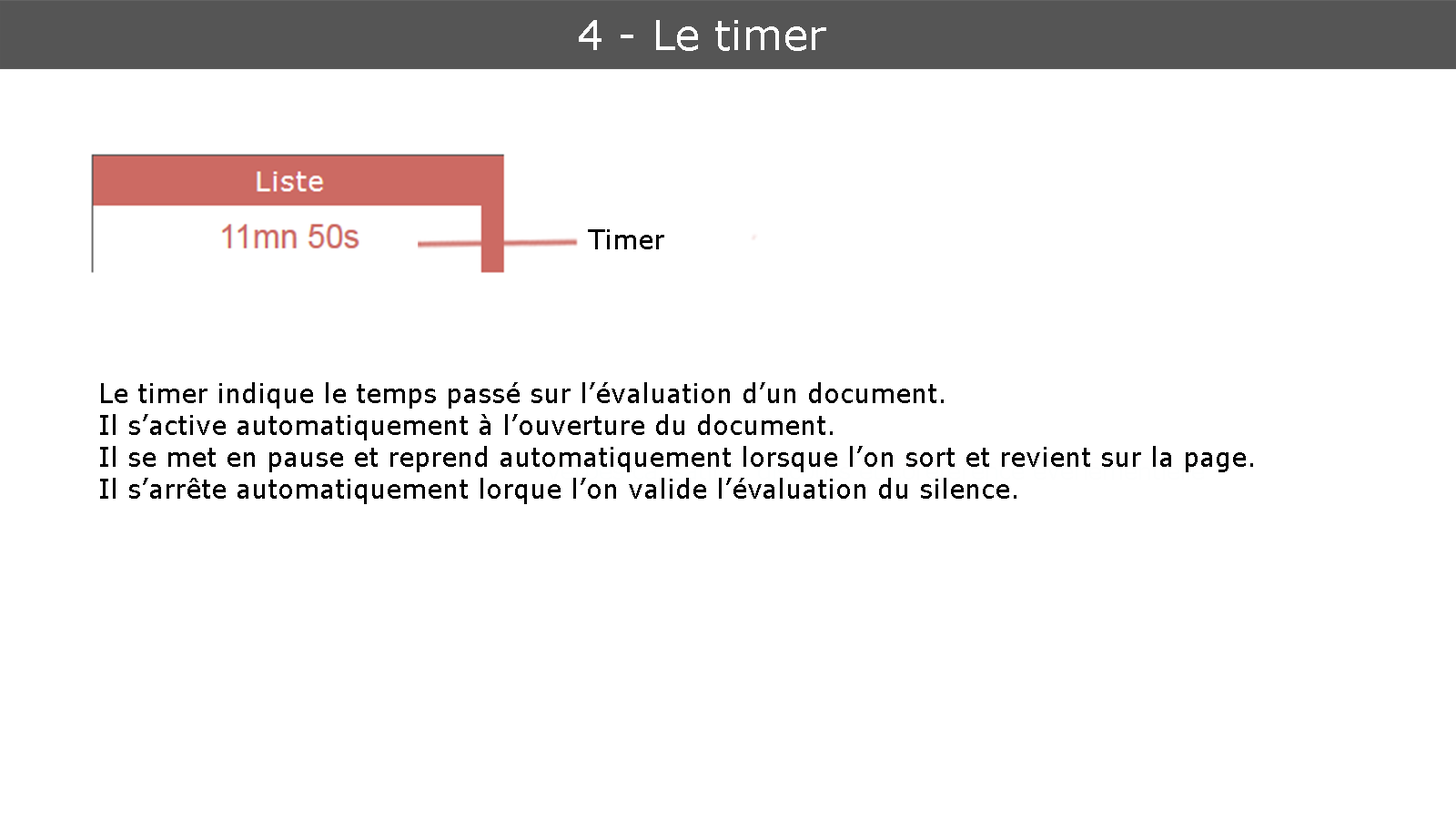
<style>
.page{position:relative;width:1456px;height:819px;background:#ffffff}
.page>*{position:absolute;margin:0}
.t1{font:41.7px "Verdana";color:#ffffff}
.t2{font:26.5px "Verdana";color:#000000}
</style>
<div class="page">
<p class="t1" style="left:579px;top:20px;width:247px;height:31px">4 - Le timer</p>
<p class="t2" style="left:588px;top:229px;width:76px;height:20px">Timer</p>
<p class="t2" style="left:100px;top:382px;width:1153px;height:122px">Le timer indique le temps passé sur l’évaluation d’un document.<br>Il s’active automatiquement à l’ouverture du document.<br>Il se met en pause et reprend automatiquement lorsque l’on sort et revient sur la page.<br>Il s’arrête automatiquement lorque l’on valide l’évaluation du silence.</p>
</div>
